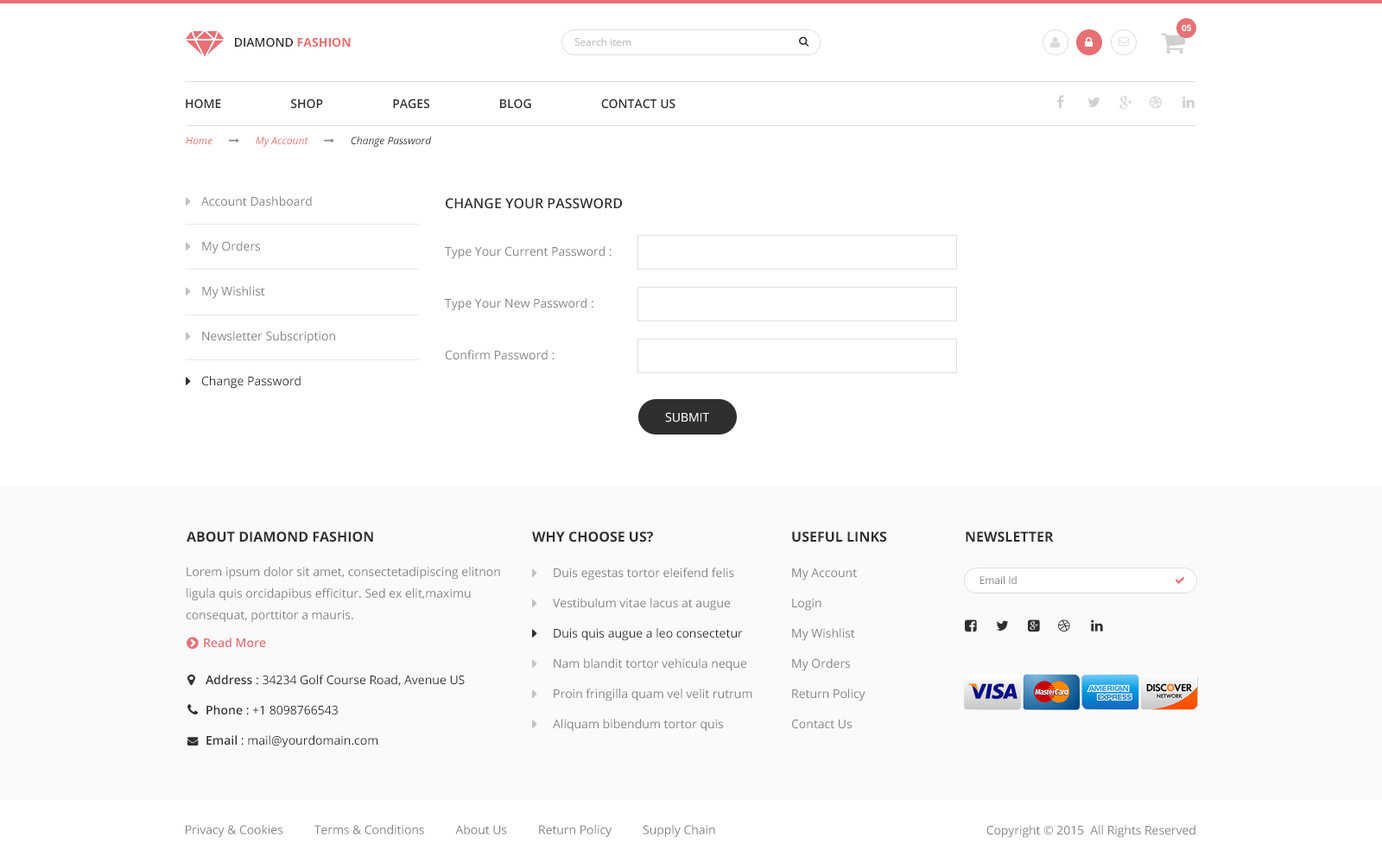
<style>
.page{position:relative;width:1382px;height:863px;background:#ffffff}
.page>*{position:absolute;margin:0}
.t1{font:8.6px "OpenSans-Bold";color:#ffffff}
.t2{font:12.1px "OpenSans-Semibold";color:#2f2f2f;text-transform:uppercase}
.t3{font:12.1px "OpenSans-Bold";color:#e77075;text-transform:uppercase}
.t4{font:10.4px "OpenSans";color:#c2c2c2}
.t5{font:12.1px/44.9px "OpenSans";color:#848484}
.t6{font:12.1px/44.9px "OpenSans";color:#2f2f2f}
.t7{font:13.8px "OpenSans-Semibold";color:#2f2f2f;text-transform:uppercase}
.t8{font:12.1px "OpenSans";color:#848484}
.t9{font:12.1px "OpenSans";color:#ffffff;text-transform:uppercase}
.t10{font:13.8px "OpenSans-Bold";color:#2f2f2f;text-transform:uppercase}
.t11{font:12.1px/21.6px "OpenSans";color:#848484}
.t12{font:12.1px/30.2px "OpenSans";color:#848484}
.t13{font:12.1px/30.2px "OpenSans";color:#2f2f2f}
.t14{font:10.4px "OpenSans";color:#887f80}
.t15{font:12.1px "OpenSans-Semibold";color:#e77075}
.t16{font:12.1px/30.2px "OpenSans-Semibold";color:#2f2f2f}
</style>
<div class="page">
<p class="t1" style="left:1182px;top:24px;width:9px;height:7px">05</p>
<p class="t2" style="left:235px;top:37px;width:116px;height:11px">Diamond <span class="t3">fashion</span></p>
<p class="t4" style="left:574px;top:38px;width:57px;height:8px">Search item</p>
<p class="t2" style="left:186px;top:98px;width:489px;height:11px">Home                      Shop                      pages                      blog                      contact us</p>
<p class="t5" style="left:201px;top:196px;width:134px;height:193px">Account Dashboard<br>My Orders<br>My Wishlist<br>Newsletter Subscription<br><span class="t6">Change Password</span></p>
<p class="t7" style="left:446px;top:198px;width:176px;height:11px">Change Your Password</p>
<p class="t8" style="left:445px;top:246px;width:167px;height:13px">Type Your Current Password :</p>
<p class="t8" style="left:445px;top:298px;width:148px;height:13px">Type Your New Password :</p>
<p class="t8" style="left:445px;top:350px;width:110px;height:10px">Confirm Password :</p>
<p class="t9" style="left:665px;top:412px;width:44px;height:10px">Submit</p>
<p class="t10" style="left:187px;top:531px;width:186px;height:11px">About diamond Fashion</p>
<p class="t10" style="left:532px;top:531px;width:121px;height:11px">why choose us?</p>
<p class="t10" style="left:792px;top:531px;width:95px;height:11px">useful links</p>
<p class="t10" style="left:966px;top:531px;width:88px;height:11px">newsletter</p>
<p class="t11" style="left:186px;top:567px;width:314px;height:55px">Lorem ipsum dolor sit amet, consectetadipiscing elitnon ligula quis orcidapibus efficitur. Sed ex elit,maximu<br>consequat, porttitor a mauris.</p>
<p class="t12" style="left:553px;top:567px;width:199px;height:165px">Duis egestas tortor eleifend felis <br>Vestibulum vitae lacus at augue <br><span class="t13">Duis quis augue a leo consectetur <br></span>Nam blandit tortor vehicula neque<br>Proin fringilla quam vel velit rutrum<br>Aliquam bibendum tortor quis</p>
<p class="t12" style="left:791px;top:568px;width:74px;height:161px">My Account<br>Login<br>My Wishlist<br>My Orders<br>Return Policy<br>Contact Us</p>
<p class="t14" style="left:979px;top:576px;width:38px;height:8px">Email Id</p>
<p class="t15" style="left:204px;top:637px;width:62px;height:11px">Read More</p>
<p class="t13" style="left:206px;top:675px;width:259px;height:73px"><span class="t16">Address</span> : 34234 Golf Course Road, Avenue US<br><span class="t16">Phone</span> : +1 8098766543<br><span class="t16">Email</span> : mail@yourdomain.com</p>
<p class="t8" style="left:186px;top:824px;width:529px;height:13px">Privacy &amp; Cookies          Terms &amp; Conditions          About Us          Return Policy          Supply Chain</p>
<p class="t8" style="left:986px;top:825px;width:209px;height:13px">Copyright © 2015  All Rights Reserved</p>
</div>
